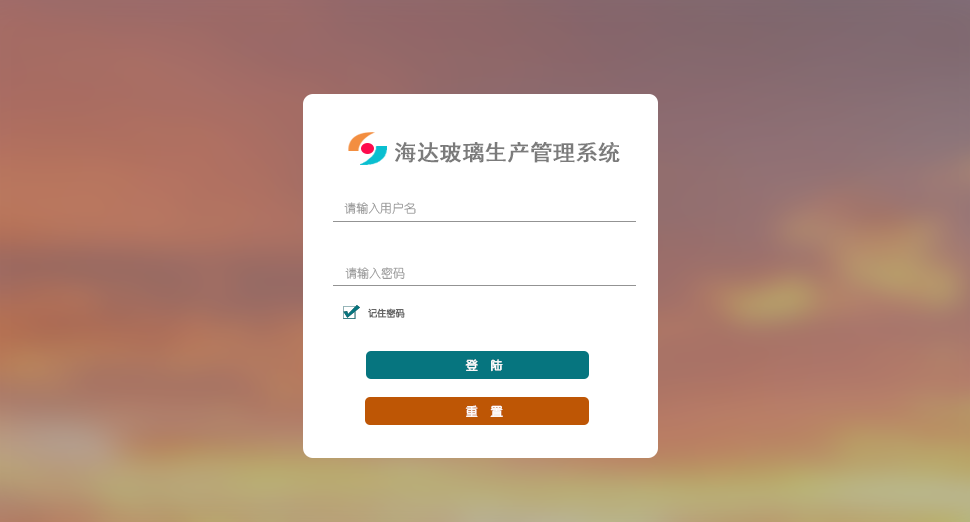
<style>
.page{position:relative;width:970px;height:522px;background:#ffffff}
.page>*{position:absolute;margin:0}
.t1{font:22px "SimHei";color:#656565;font-weight:bold}
.t2{font:11.9px "YouYuan";color:#939393}
.t3{font:9px "YouYuan";color:#656565;font-weight:bold}
.t4{font:12px "YouYuan";color:#ffffff;font-weight:bold}
</style>
<div class="page">
<p class="t1" style="left:395px;top:141px;width:225px;height:22px;opacity:0.89">海达玻璃生产管理系统</p>
<p class="t2" style="left:344px;top:202px;width:72px;height:12px">请输入用户名</p>
<p class="t2" style="left:345px;top:267px;width:60px;height:12px">请输入密码</p>
<p class="t3" style="left:368px;top:308px;width:37px;height:10px">记住密码</p>
<p class="t4" style="left:465px;top:359px;width:38px;height:13px">登  陆</p>
<p class="t4" style="left:465px;top:405px;width:38px;height:12px">重  置</p>
</div>
